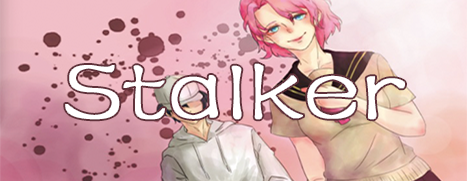
<style>
.page{position:relative;width:467px;height:181px}
.page>*{position:absolute;margin:0}
.t1{font:100px "FZSTK--GBK1-0";color:#ffffff;font-weight:bold}
</style>
<div class="page">
<p class="t1" style="left:64px;top:62px;width:342px;height:59px">Stalker</p>
</div>
